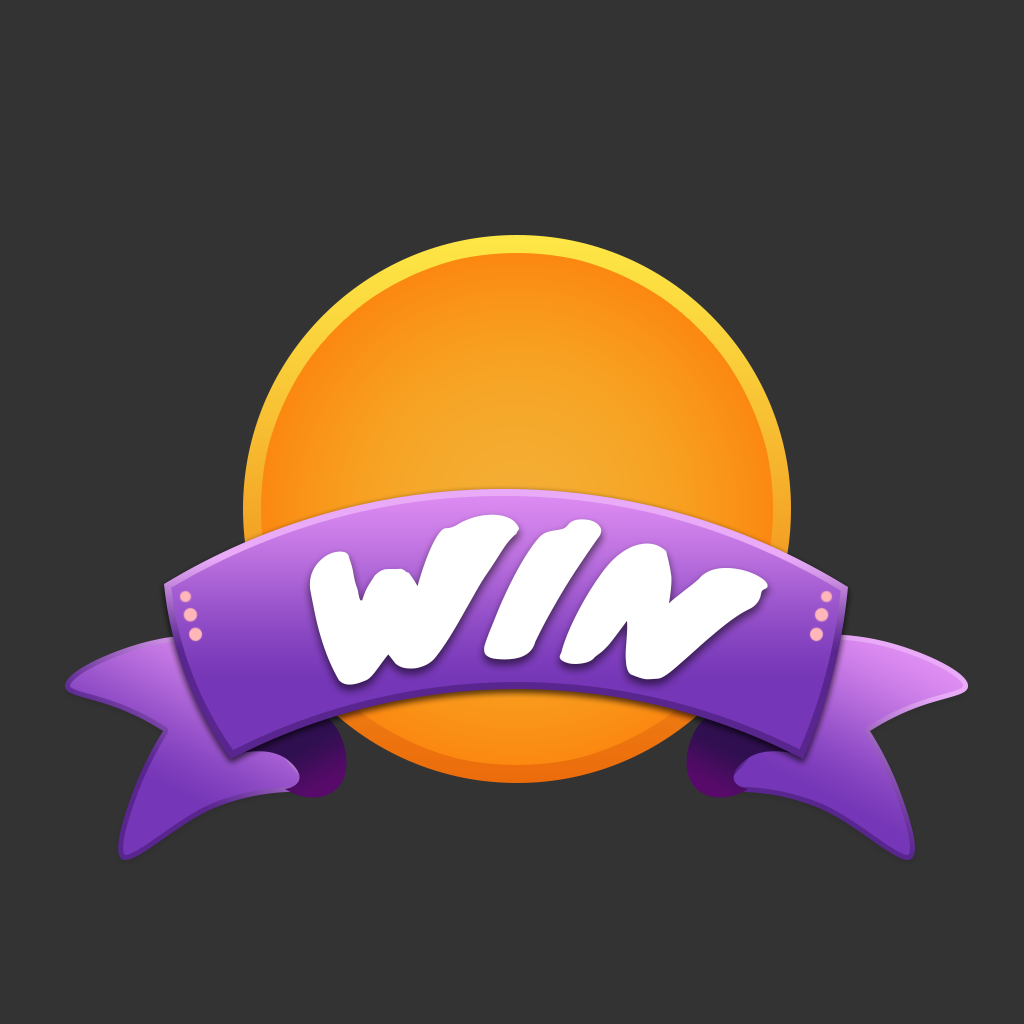
<style>
.page{position:relative;width:1024px;height:1024px;background:#333333}
.page>*{position:absolute;margin:0}
.t1{font:173px "Knewave-Regular";color:#ffffff}
</style>
<div class="page">
<p class="t1" style="left:309px;top:514px;width:459px;height:171px;rotate:3deg">WIN</p>
</div>
